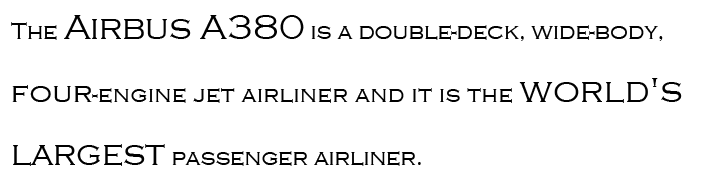
<style>
.page{position:relative;width:702px;height:194px;background:#ffffff}
.page>*{position:absolute;margin:0}
.t1{font:24px "CopperplateGothic-Light";color:#000000}
.t2{font:36px "CopperplateGothic-Light";color:#000000}
.t3{font:30px "CopperplateGothic-Light";color:#000000}
</style>
<div class="page">
<p class="t1" style="left:11px;top:15px;width:671px;height:151px;text-align:justify">The <span class="t2">Airbus A380</span> is a double-deck, wide-body, <br><span class="t3">four</span>-engine jet airliner and it is the <span class="t2">world's largest</span> passenger airliner.</p>
</div>
